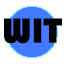
<style>
.page{position:relative;width:64px;height:64px;background:#ffffff}
.page>*{position:absolute;margin:0}
.t1{font:36px "Bauhaus93";color:#000000}
</style>
<div class="page">
<p class="t1" style="left:4px;top:18px;width:58px;height:26px">WIT</p>
</div>
